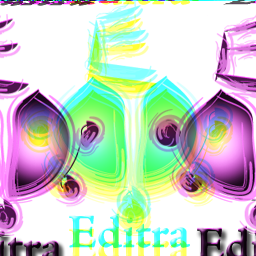
<style>
.page{position:relative;width:256px;height:256px;background:#ffffff}
.page>*{position:absolute;margin:0}
.t1{font:48px "AJensonPro-Bold"}
</style>
<div class="page">
<p class="t1" style="left:69px;top:212px;width:121px;height:35px">Editra</p>
</div>
